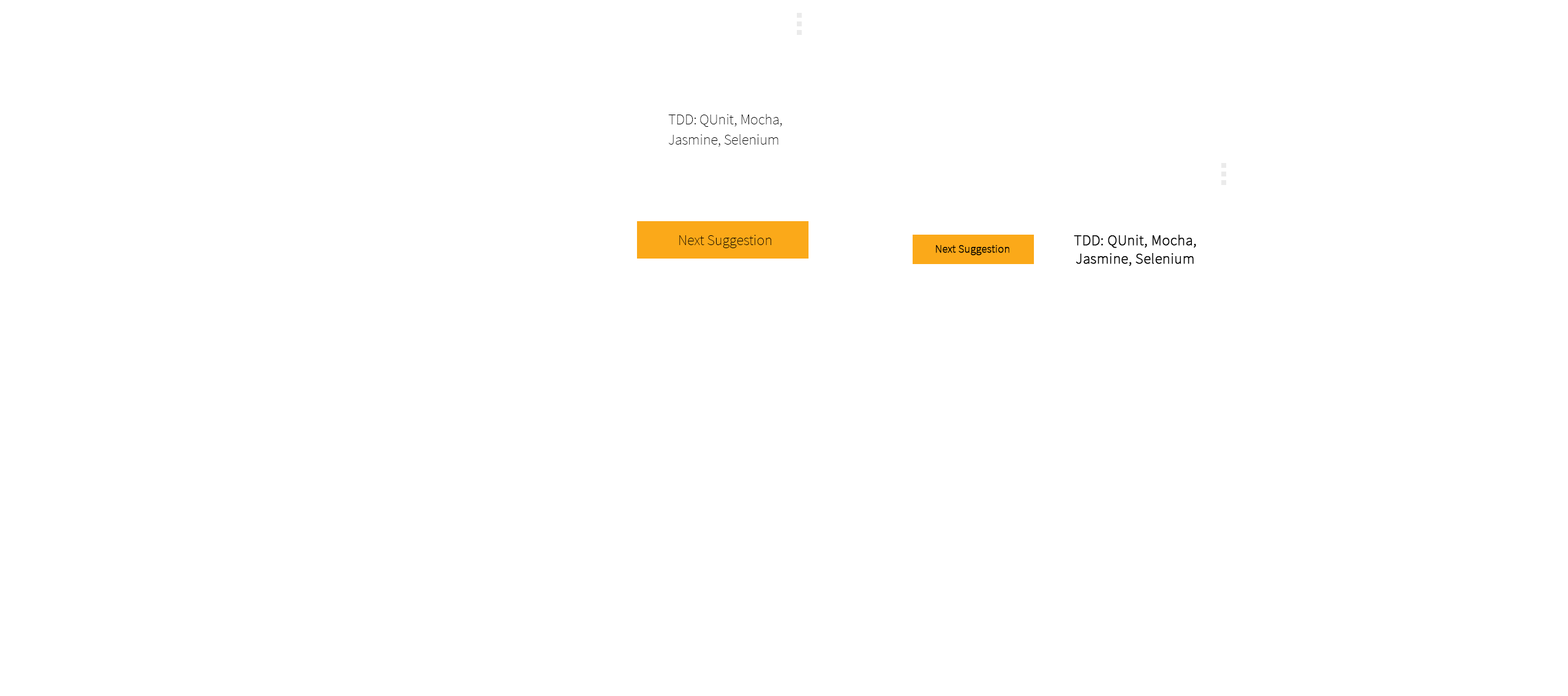
<style>
.page{position:relative;width:1568px;height:696px;background:#ffffff}
.page>*{position:absolute;margin:0}
.t1{font:14.7px/20.2px "SourceSansPro-ExtraLight";color:#000000}
.t2{font:14.7px "SourceSansPro-ExtraLight";color:#000000}
.t3{font:11px "SourceSansPro-ExtraLight";color:#000000;font-weight:bold}
.t4{font:14.7px/18.4px "SourceSansPro-ExtraLight";letter-spacing:0.005em;color:#000000;font-weight:bold}
</style>
<div class="page">
<p class="t1" style="left:668px;top:114px;width:114px;height:33px">TDD: QUnit, Mocha,<br>Jasmine, Selenium</p>
<p class="t2" style="left:679px;top:235px;width:93px;height:13px">Next Suggestion</p>
<p class="t3" style="left:936px;top:245px;width:73px;height:10px">Next Suggestion</p>
<p class="t4" style="left:1074px;top:235px;width:122px;height:31px;text-align:center">TDD: QUnit, Mocha, Jasmine, Selenium</p>
</div>
